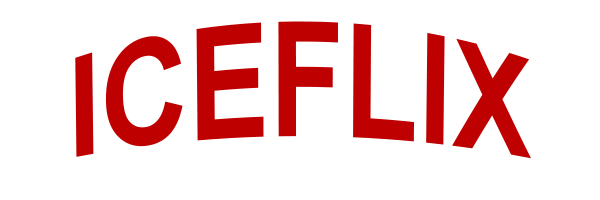
<style>
.page{position:relative;width:600px;height:200px;background:#ffffff}
.page>*{position:absolute;margin:0}
.t1{font:120px "Arial-BoldMT";color:#bf0000}
</style>
<div class="page">
<p class="t1" style="left:75px;top:21px;width:456px;height:138px">ICEFLIX</p>
</div>
